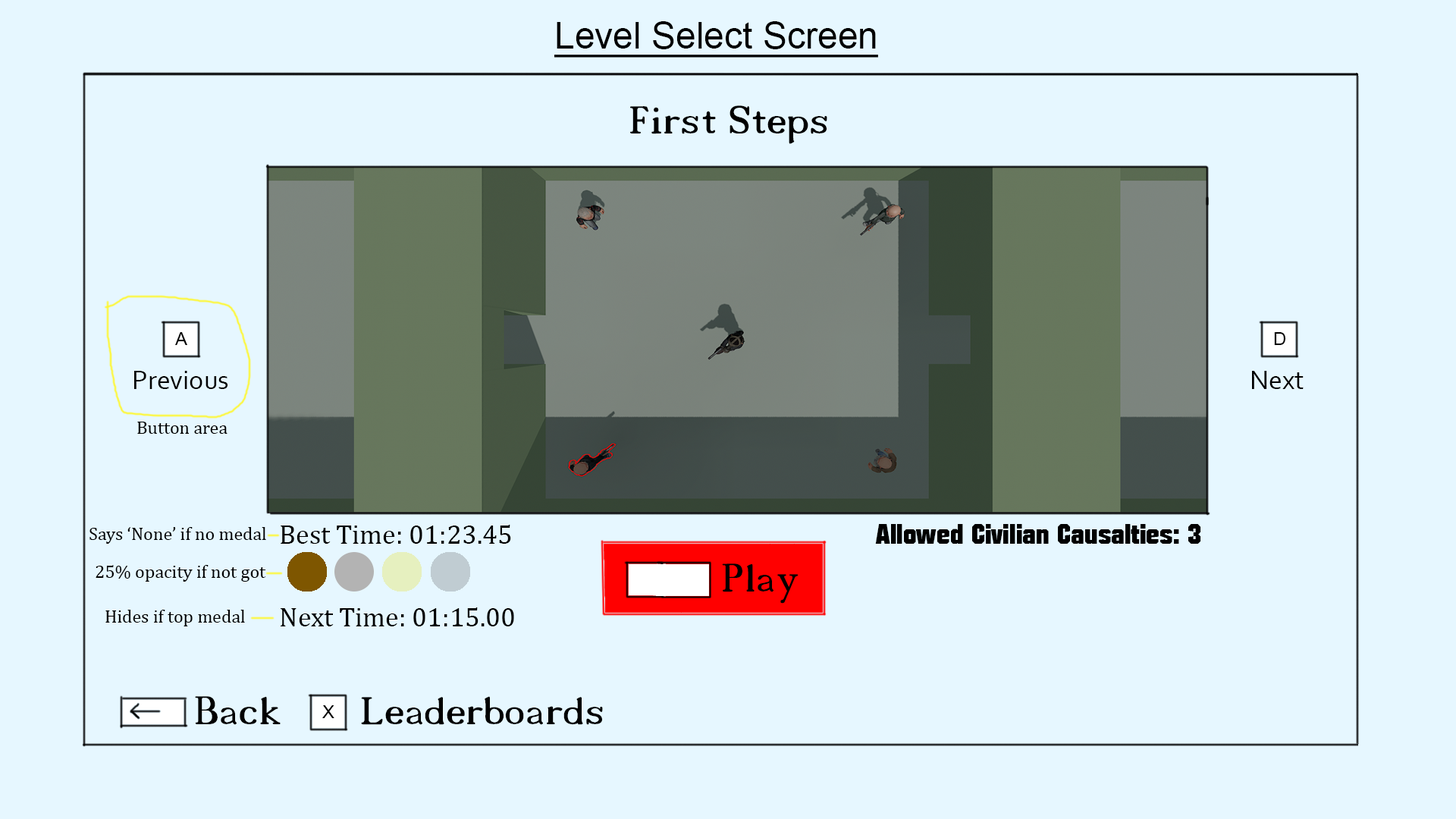
<style>
.page{position:relative;width:1456px;height:819px;background:#e6f7ff}
.page>*{position:absolute;margin:0}
.t1{font:36.4px "ArialMT";color:#000000;text-decoration:underline}
.t2{font:54.6px "18thCentury";color:#000000}
.t3{font:18.2px "ArialMT";color:#000000}
.t4{font:27.3px "Corbel";color:#000000}
.t5{font:18.2px "CambriaMath";color:#000000}
.t6{font:27.3px "CambriaMath";color:#000000}
.t7{font:27.3px "Autumn";color:#000000}
</style>
<div class="page">
<p class="t1" style="left:554px;top:21px;width:324px;height:37px">Level Select Screen</p>
<p class="t2" style="left:630px;top:105px;width:197px;height:39px">First Steps</p>
<p class="t3" style="left:175px;top:332px;width:12px;height:13px">A</p>
<p class="t3" style="left:1274px;top:332px;width:12px;height:13px">D</p>
<p class="t4" style="left:134px;top:371px;width:93px;height:18px">Previous</p>
<p class="t4" style="left:1252px;top:371px;width:52px;height:18px">Next</p>
<p class="t5" style="left:137px;top:422px;width:90px;height:12px">Button area</p>
<p class="t5" style="left:89px;top:527px;width:177px;height:17px">Says ‘None’ if no medal</p>
<p class="t6" style="left:281px;top:525px;width:230px;height:19px">Best Time: 01:23.45</p>
<p class="t7" style="left:875px;top:524px;width:326px;height:20px">Allowed Civilian Causalties: 3</p>
<p class="t5" style="left:96px;top:565px;width:170px;height:17px">25% opacity if not got</p>
<p class="t2" style="left:722px;top:563px;width:77px;height:41px">Play</p>
<p class="t5" style="left:105px;top:610px;width:140px;height:16px">Hides if top medal</p>
<p class="t6" style="left:281px;top:607px;width:233px;height:19px">Next Time: 01:15.00</p>
<p class="t2" style="left:195px;top:696px;width:86px;height:29px">Back</p>
<p class="t2" style="left:361px;top:696px;width:242px;height:29px">Leaderboards</p>
<p class="t3" style="left:322px;top:705px;width:12px;height:13px">X</p>
</div>
